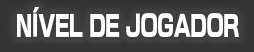
<style>
.page{position:relative;width:254px;height:52px}
.page>*{position:absolute;margin:0}
.t1{font:28px "NewRodinPro-EB";color:#fffeff;scale:0.67 1}
</style>
<div class="page">
<p class="t1" style="left:17px;top:7px;width:222px;height:30px">NÍVEL DE JOGADOR</p>
</div>
